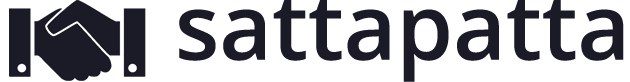
<style>
.page{position:relative;width:630px;height:82px;background:#ffffff}
.page>*{position:absolute;margin:0}
.t1{font:91px "OpenSans-Semibold";color:#1a1b26}
</style>
<div class="page">
<p class="t1" style="left:179px;top:0px;width:445px;height:82px">sattapatta</p>
</div>
